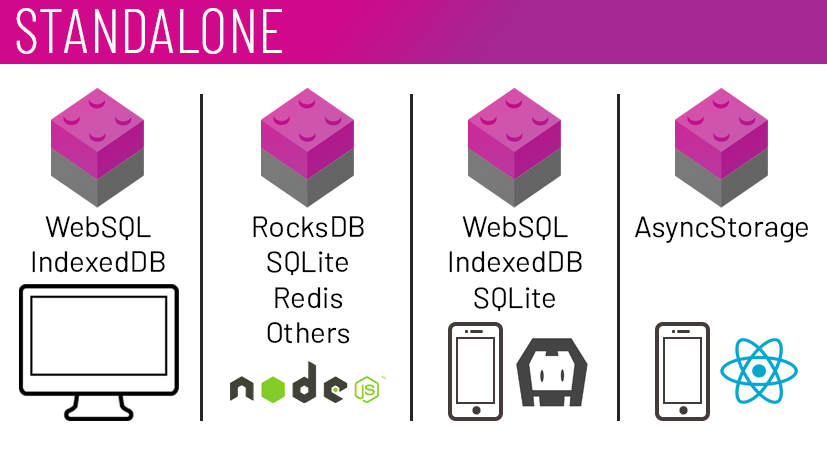
<style>
.page{position:relative;width:827px;height:450px;background:#ffffff}
.page>*{position:absolute;margin:0}
.t1{font:62.5px "BarlowCondensed-Light";color:#ffffff}
.t2{font:29.4px "Barlow-Regular";color:#000000}
</style>
<div class="page">
<p class="t1" style="left:16px;top:8px;width:266px;height:46px">STANDALONE</p>
<p class="t2" style="left:32px;top:216px;width:133px;height:57px;text-align:center">WebSQL<br>IndexedDB</p>
<p class="t2" style="left:253px;top:216px;width:111px;height:128px;text-align:center">RocksDB<br>SQLite<br>Redis<br>Others</p>
<p class="t2" style="left:449px;top:216px;width:133px;height:96px;text-align:center">WebSQL<br>IndexedDB<br>SQLite</p>
<p class="t2" style="left:635px;top:216px;width:173px;height:27px">AsyncStorage</p>
</div>
